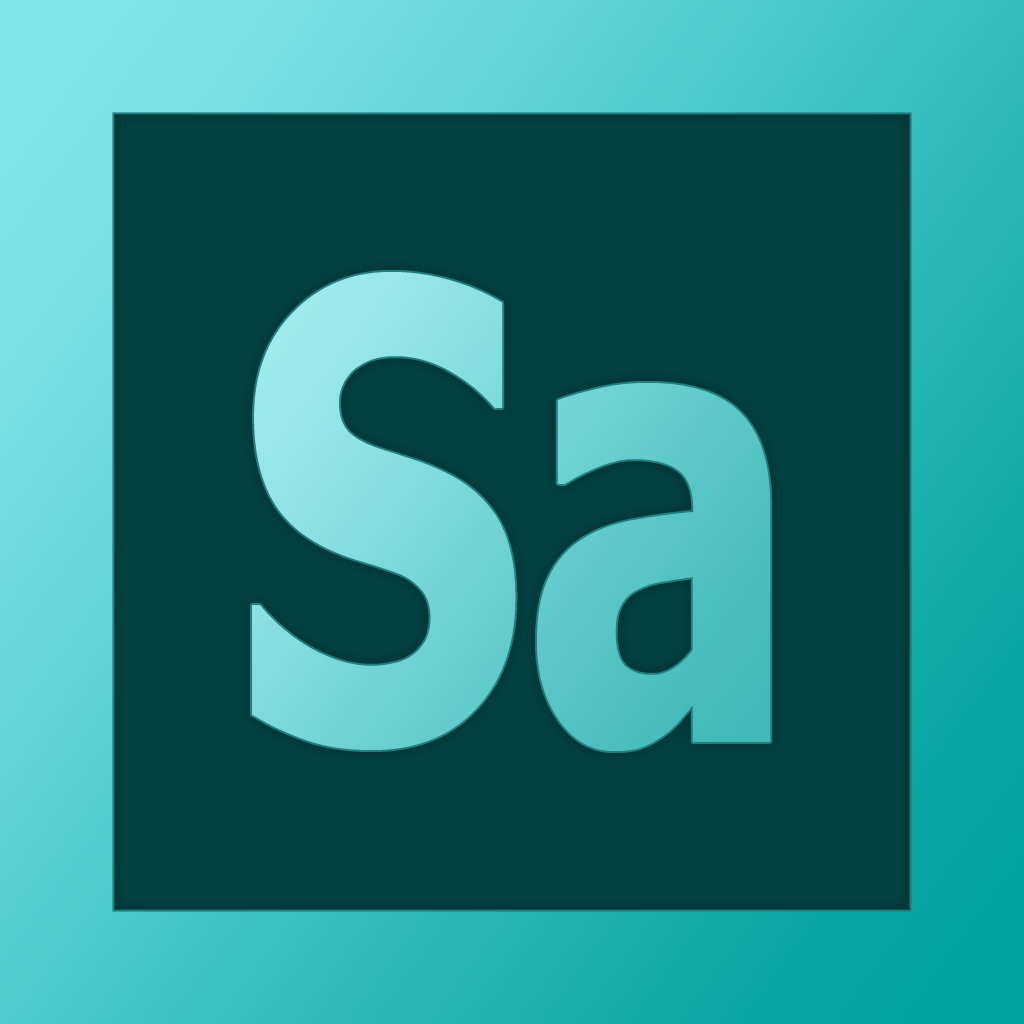
<style>
.page{position:relative;width:1024px;height:1024px;background:#024042}
.page>*{position:absolute;margin:0}
.t1{font:635px "Tahoma-Bold";letter-spacing:0.005em;scale:0.71 1}
</style>
<div class="page">
<p class="t1" style="left:252px;top:272px;width:519px;height:479px">Sa</p>
</div>
